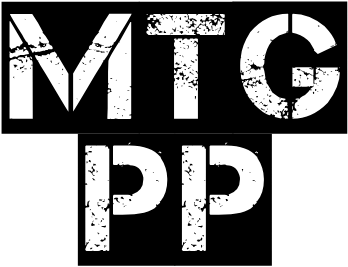
<style>
.page{position:relative;width:348px;height:267px;background:#000000}
.page>*{position:absolute;margin:0}
.t1{font:150px "Captureit2";color:#000000}
</style>
<div class="page">
<p class="t1" style="left:1px;top:1px;width:347px;height:133px">MTG</p>
<p class="t1" style="left:77px;top:133px;width:195px;height:133px">PP</p>
</div>
